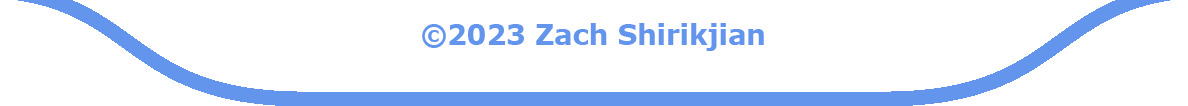
<style>
.page{position:relative;width:1188px;height:106px;background:#ffffff}
.page>*{position:absolute;margin:0}
.t1{font:28px "Verdana-Bold";letter-spacing:-0.01em;color:#6495ed}
</style>
<div class="page">
<p class="t1" style="left:422px;top:23px;width:342px;height:28px">©2023 Zach Shirikjian</p>
</div>
